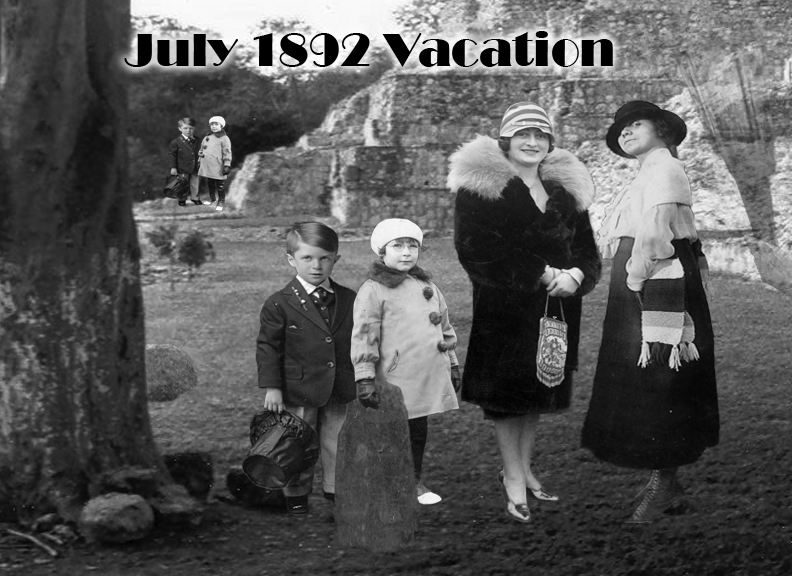
<style>
.page{position:relative;width:792px;height:576px}
.page>*{position:absolute;margin:0}
.t1{font:48px "Broadway";color:#000000}
</style>
<div class="page">
<p class="t1" style="left:124px;top:31px;width:489px;height:36px">July 1892 Vacation</p>
</div>
